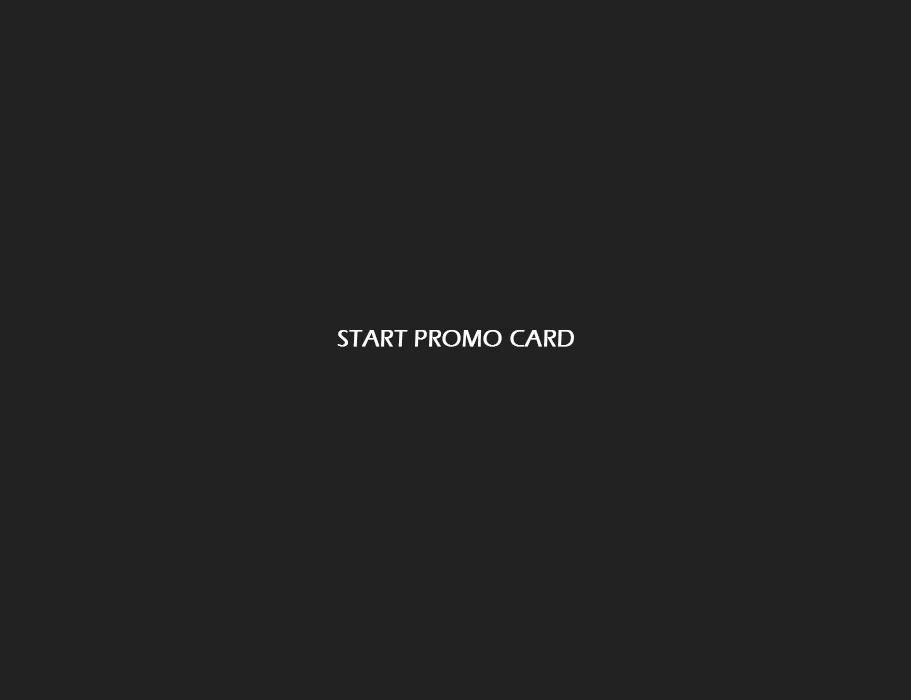
<style>
.page{position:relative;width:911px;height:700px;background:#222222}
.page>*{position:absolute;margin:0}
.t1{font:24px "ErasITC-Medium";color:#ffffff;text-transform:uppercase;font-weight:bold}
</style>
<div class="page">
<p class="t1" style="left:337px;top:330px;width:237px;height:17px">start PRomo card</p>
</div>
